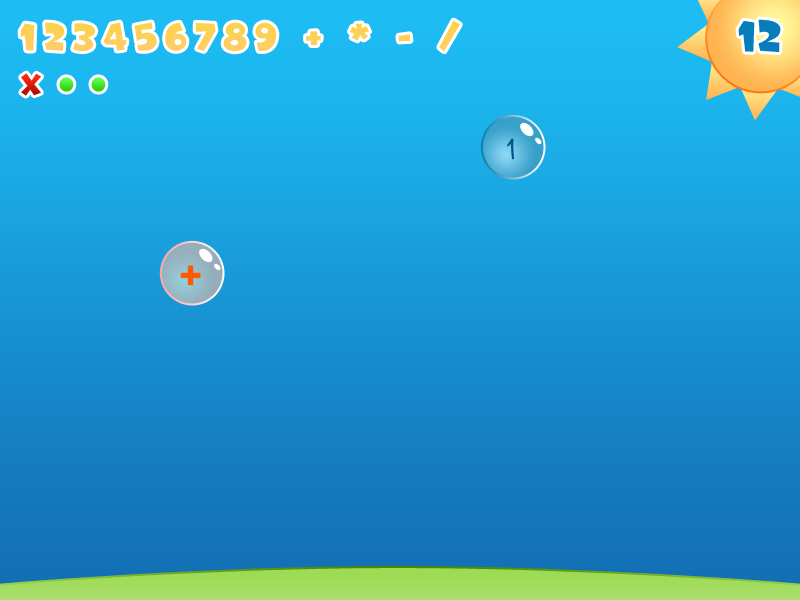
<style>
.page{position:relative;width:800px;height:600px}
.page>*{position:absolute;margin:0}
.t1{font:35px "Marvin";letter-spacing:0.2em;color:#fdd059}
.t2{font:40px "Marvin";color:#077db9}
.t3{font:27px "Marvin";letter-spacing:0.4em}
.t4{font:64.1px "Marvin";letter-spacing:0.18em}
.t5{font:30px "SpacedOut";color:#00528c;font-weight:bold}
.t6{font:53.1px "Opificio";color:#ff5a00;font-weight:bold}
</style>
<div class="page">
<p class="t1" style="left:20px;top:20px;width:440px;height:32px">123456789 + * - /</p>
<p class="t2" style="left:738px;top:19px;width:43px;height:33px">12</p>
<p class="t3" style="left:21px;top:73px;width:21px;height:23px">X</p>
<p class="t4" style="left:59px;top:77px;width:47px;height:15px">..</p>
<p class="t5" style="left:507px;top:138px;width:7px;height:22px">1</p>
<p class="t6" style="left:180px;top:265px;width:21px;height:21px">+</p>
</div>
